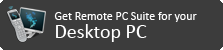
<style>
.page{position:relative;width:223px;height:50px;background:#3c3c3c}
.page>*{position:absolute;margin:0}
.t1{font:12px "Calibri";color:#ffffff}
.t2{font:20px "Calibri";color:#ffffff}
</style>
<div class="page">
<p class="t1" style="left:54px;top:12px;width:143px;height:10px">Get Remote PC Suite for your</p>
<p class="t2" style="left:56px;top:24px;width:91px;height:18px">Desktop PC</p>
</div>
